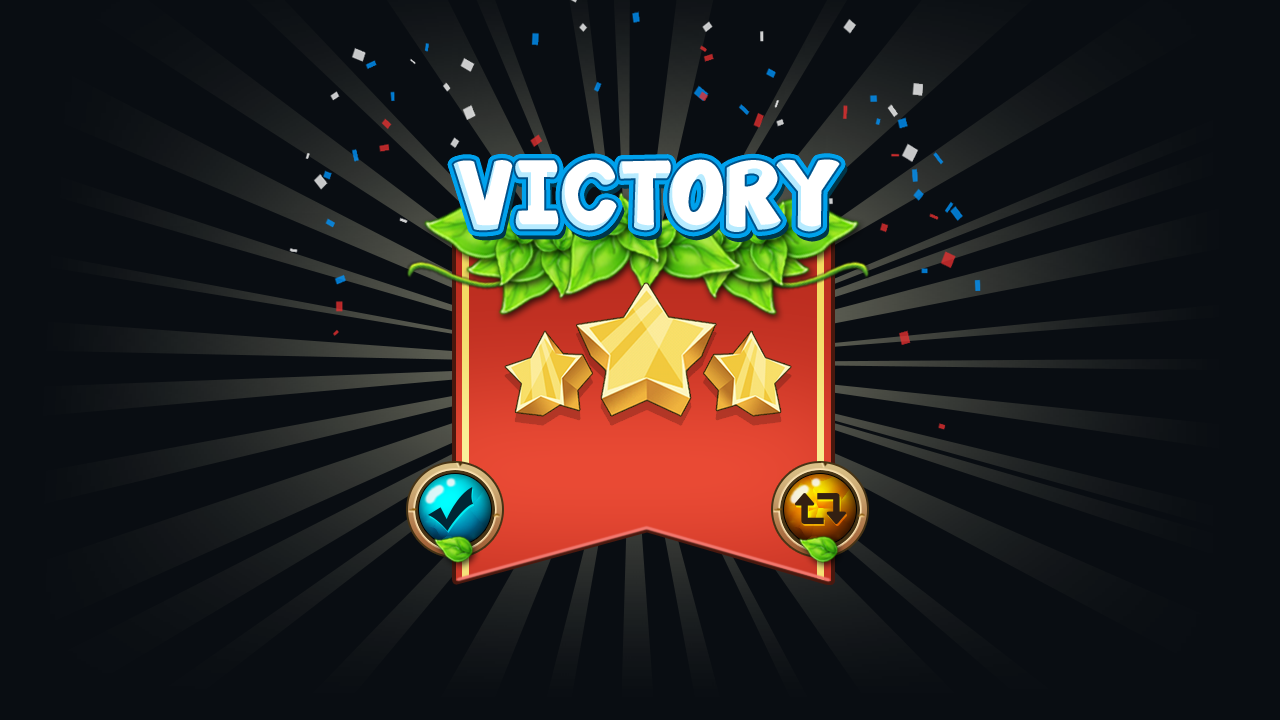
<style>
.page{position:relative;width:1280px;height:720px;background:#090d12}
.page>*{position:absolute;margin:0}
.t1{font:87.5px "JandaManateeSolid";color:#ffffff;text-transform:uppercase}
</style>
<div class="page">
<p class="t1" style="left:453px;top:159px;width:387px;height:73px">Victory</p>
</div>
